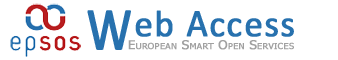
<style>
.page{position:relative;width:338px;height:60px;background:#ffffff}
.page>*{position:absolute;margin:0}
.t1{font:37.5px "Calibri";letter-spacing:0.025em;color:#2771ae;font-weight:bold}
.t2{font:61.1px "Calibri";letter-spacing:0.025em;color:#2771ae;font-weight:bold;scale:0.83 1}
.t3{font:39.4px "Calibri";letter-spacing:0.025em;color:#2771ae;font-weight:bold;scale:0.93 1}
.t4{font:12px "Tahoma";color:#a1a1a1;font-variant:small-caps;font-weight:bold;scale:1.1 1}
</style>
<div class="page">
<p class="t1" style="left:87px;top:10px;width:207px;height:40px"><span class="t2">W</span>eb <span class="t3">A</span>ccess</p>
<p class="t4" style="left:128px;top:40px;width:166px;height:10px">European Smart Open Services</p>
</div>
